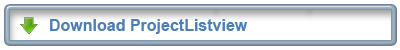
<style>
.page{position:relative;width:400px;height:50px;background:#ffffff}
.page>*{position:absolute;margin:0}
.t1{font:16px "Arial-BoldMT";color:#4d7eb6}
</style>
<div class="page">
<p class="t1" style="left:50px;top:19px;width:198px;height:15px">Download ProjectListview</p>
</div>
